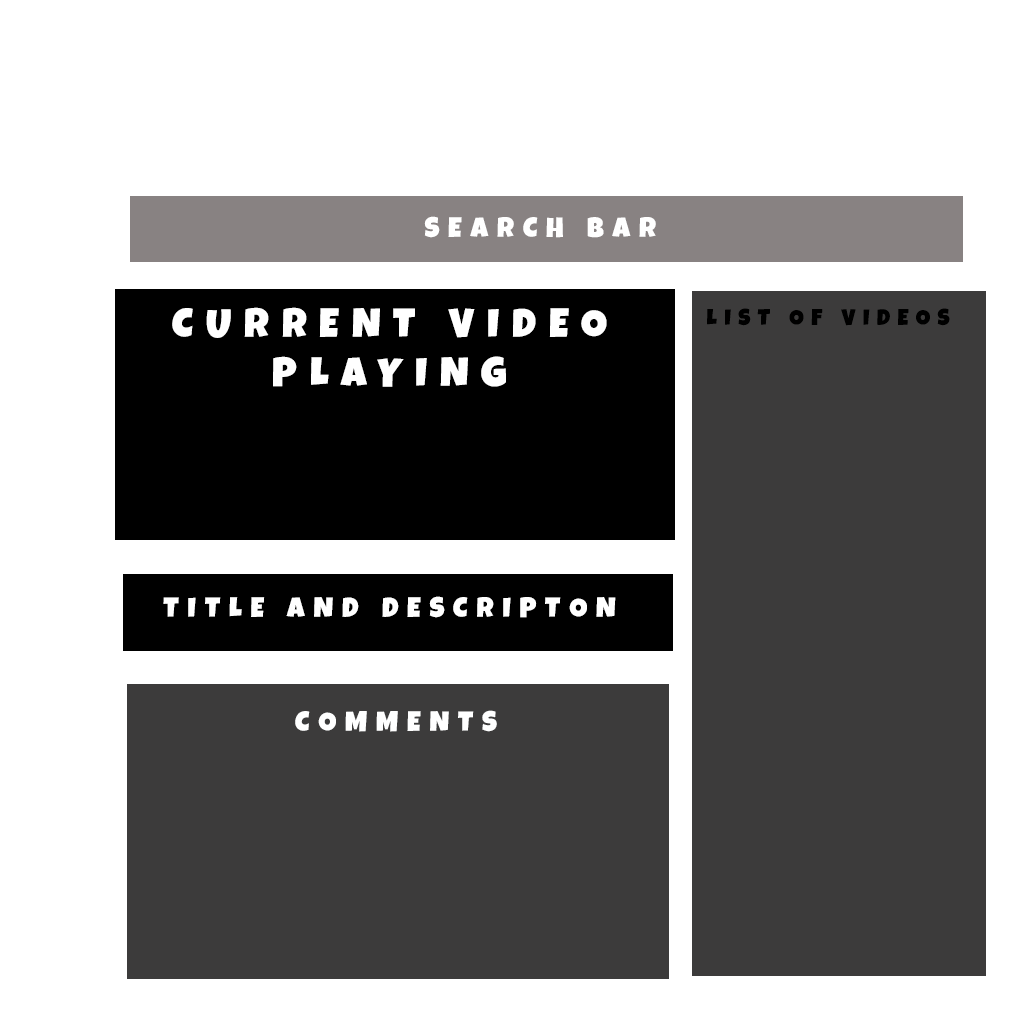
<style>
.page{position:relative;width:1024px;height:1024px;background:#ffffff}
.page>*{position:absolute;margin:0}
.t1{font:27.9px "LuckiestGuy-Regular";letter-spacing:0.32em;color:#ffffff;text-transform:uppercase}
.t2{font:40.6px "LuckiestGuy-Regular";letter-spacing:0.32em;color:#ffffff;text-transform:uppercase}
.t3{font:22.9px "LuckiestGuy-Regular";letter-spacing:0.32em;color:#000000;text-transform:uppercase}
.t4{font:22.9px "LuckiestGuy-Regular";letter-spacing:0.32em;color:#3c3b3b;text-transform:uppercase}
</style>
<div class="page">
<p class="t1" style="left:424px;top:216px;width:232px;height:22px">Search bar</p>
<p class="t2" style="left:172px;top:307px;width:435px;height:80px;text-align:center">current video playing</p>
<p class="t3" style="left:707px;top:308px;width:262px;height:18px">list of videos<span class="t4">c</span></p>
<p class="t1" style="left:163px;top:596px;width:453px;height:22px">Title and descripton</p>
<p class="t1" style="left:295px;top:710px;width:202px;height:22px">Comments</p>
</div>
